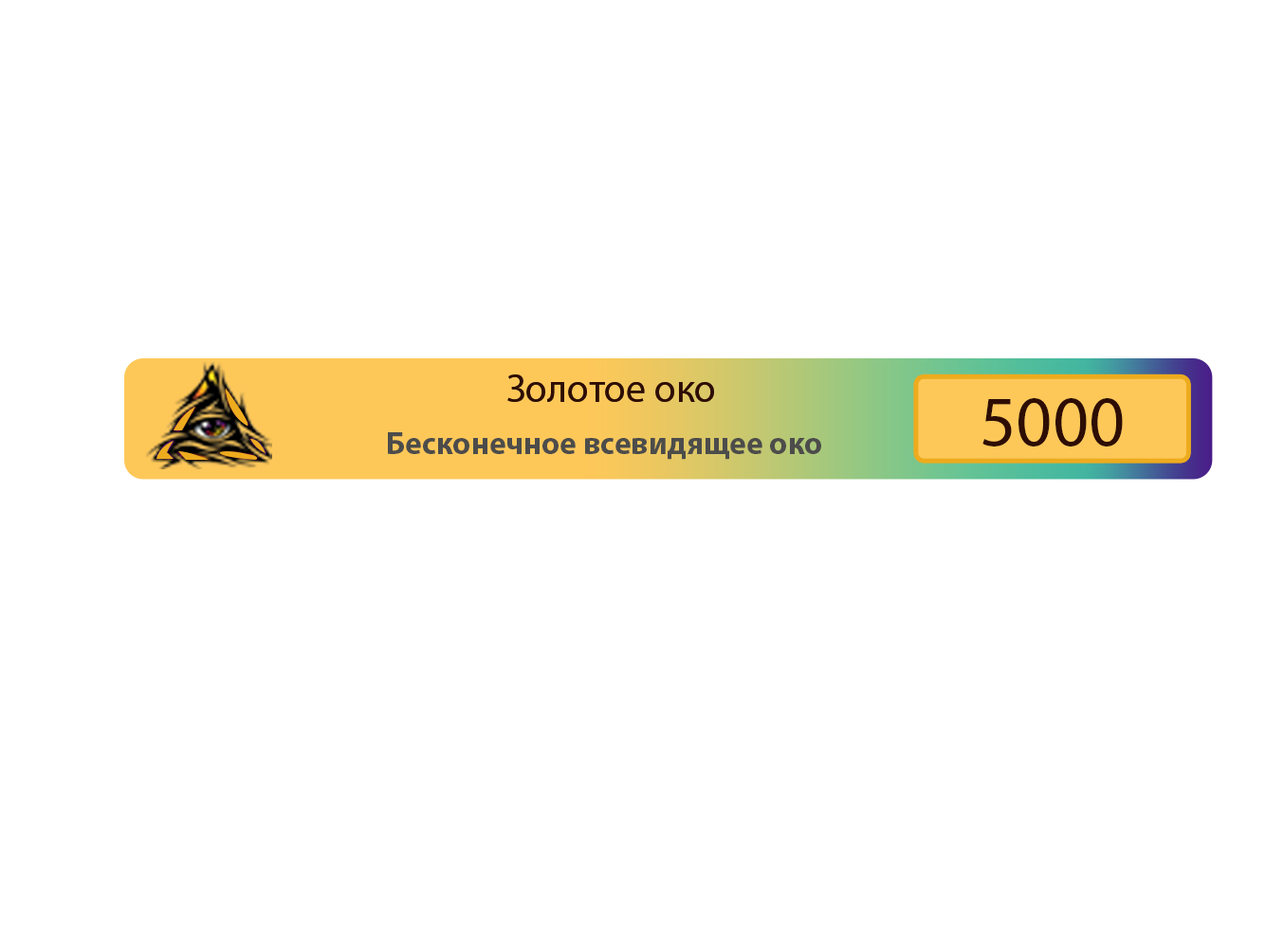
<style>
.page{position:relative;width:1284px;height:929px;background:#ffffff}
.page>*{position:absolute;margin:0}
.t1{font:39.5px "MyriadPro-Regular";color:#2e0d04}
.t2{font:71.1px "MyriadPro-Regular";color:#2e0d04}
.t3{font:31.6px "MyriadPro-Bold";color:#4c4c4b}
</style>
<div class="page">
<p class="t1" style="left:507px;top:374px;width:207px;height:28px">Золотое око</p>
<p class="t1" style="left:507px;top:374px;width:207px;height:28px">Золотое око</p>
<p class="t2" style="left:982px;top:398px;width:140px;height:48px">5000</p>
<p class="t3" style="left:388px;top:432px;width:433px;height:28px">Бесконечное всевидящее око</p>
</div>
